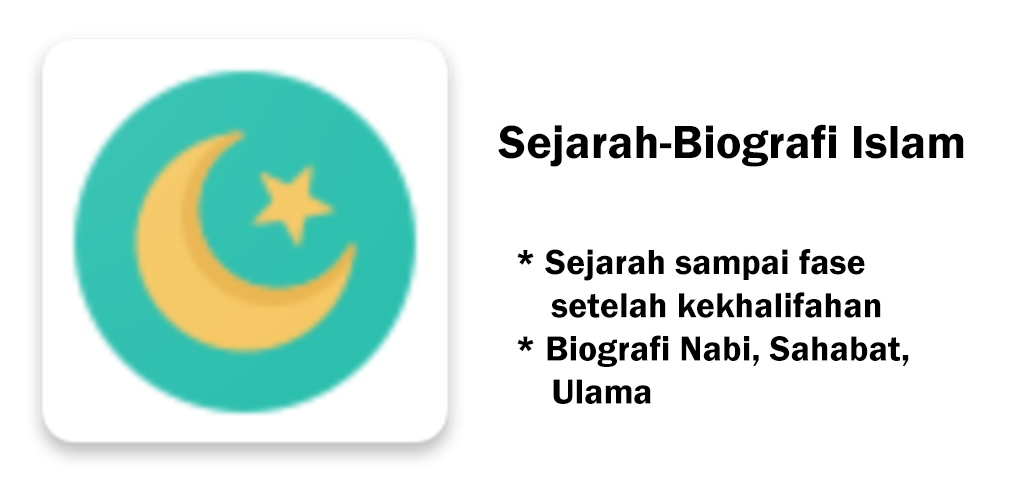
<style>
.page{position:relative;width:1024px;height:500px;background:#ffffff}
.page>*{position:absolute;margin:0}
.t1{font:48px "FranklinGothic-Demi";color:#000000}
.t2{font:36px "FranklinGothic-Demi";color:#000000}
</style>
<div class="page">
<p class="t1" style="left:498px;top:124px;width:466px;height:43px">Sejarah-Biografi Islam</p>
<p class="t2" style="left:517px;top:249px;width:392px;height:155px">* Sejarah sampai fase <br>    setelah kekhalifahan<br>* Biografi Nabi, Sahabat, <br>    Ulama</p>
</div>
